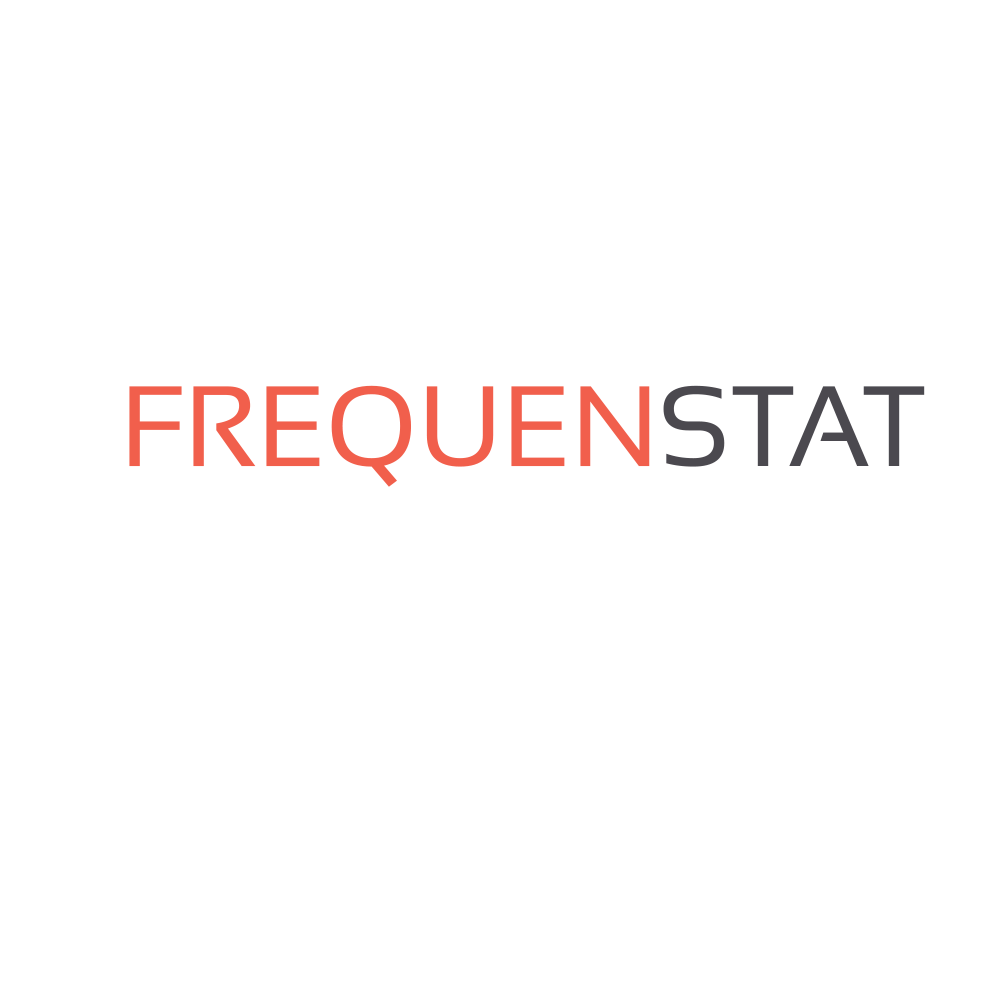
<style>
.page{position:relative;width:1000px;height:1000px;background:#ffffff}
.page>*{position:absolute;margin:0}
.t1{font:114px "Sansation-Regular";color:#f15f4c}
.t2{font:114px "Sansation-Regular";color:#4b494f}
</style>
<div class="page">
<p class="t1" style="left:129px;top:385px;width:796px;height:102px">FREQUEN<span class="t2">STAT</span></p>
</div>
